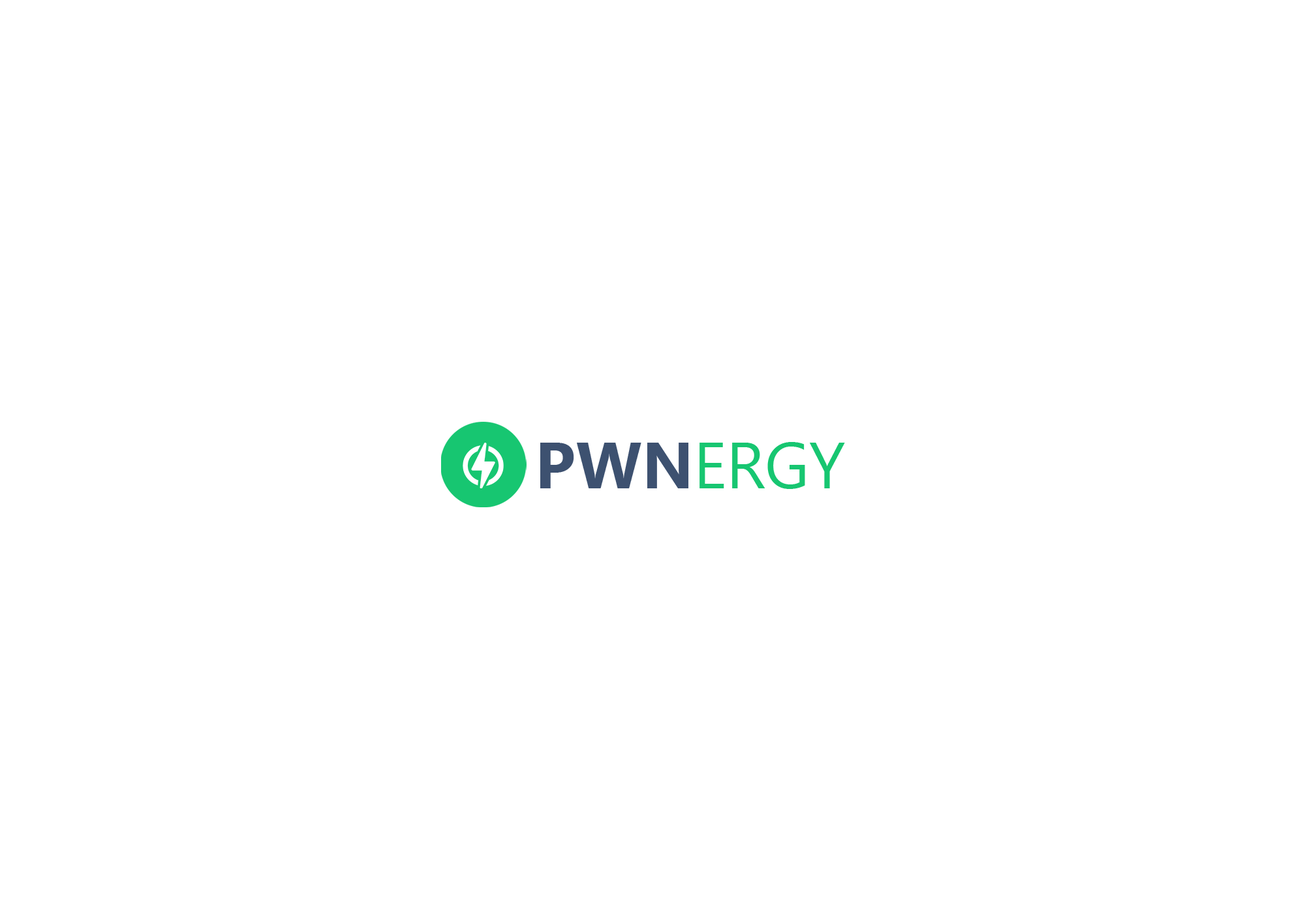
<style>
.page{position:relative;width:1305px;height:914px;background:#ffffff}
.page>*{position:absolute;margin:0}
.t1{font:65.3px "SegoeUI";color:#17c671}
.t2{font:65.3px "SegoeUI-Bold";color:#3d5170}
</style>
<div class="page">
<p class="t1" style="left:540px;top:442px;width:305px;height:47px"><span class="t2">PWN</span>ERGY</p>
</div>
